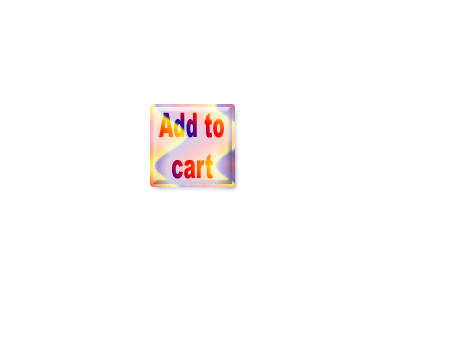
<style>
.page{position:relative;width:454px;height:340px;background:#ffffff}
.page>*{position:absolute;margin:0}
.t1{font:33.7px "Arial-Black";scale:0.55 1}
</style>
<div class="page">
<p class="t1" style="left:159px;top:112px;width:65px;height:67px">Add to<br>  cart</p>
</div>
